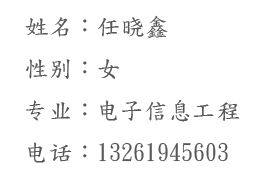
<style>
.page{position:relative;width:253px;height:187px;background:#ffffff}
.page>*{position:absolute;margin:0}
.t1{font:24px "DFKaiShu-SB-Estd-BF";color:#575757}
</style>
<div class="page">
<p class="t1" style="left:25px;top:15px;width:215px;height:148px">姓名：任晓鑫<br>性别：女<br>专业：电子信息工程<br>电话：13261945603</p>
</div>
